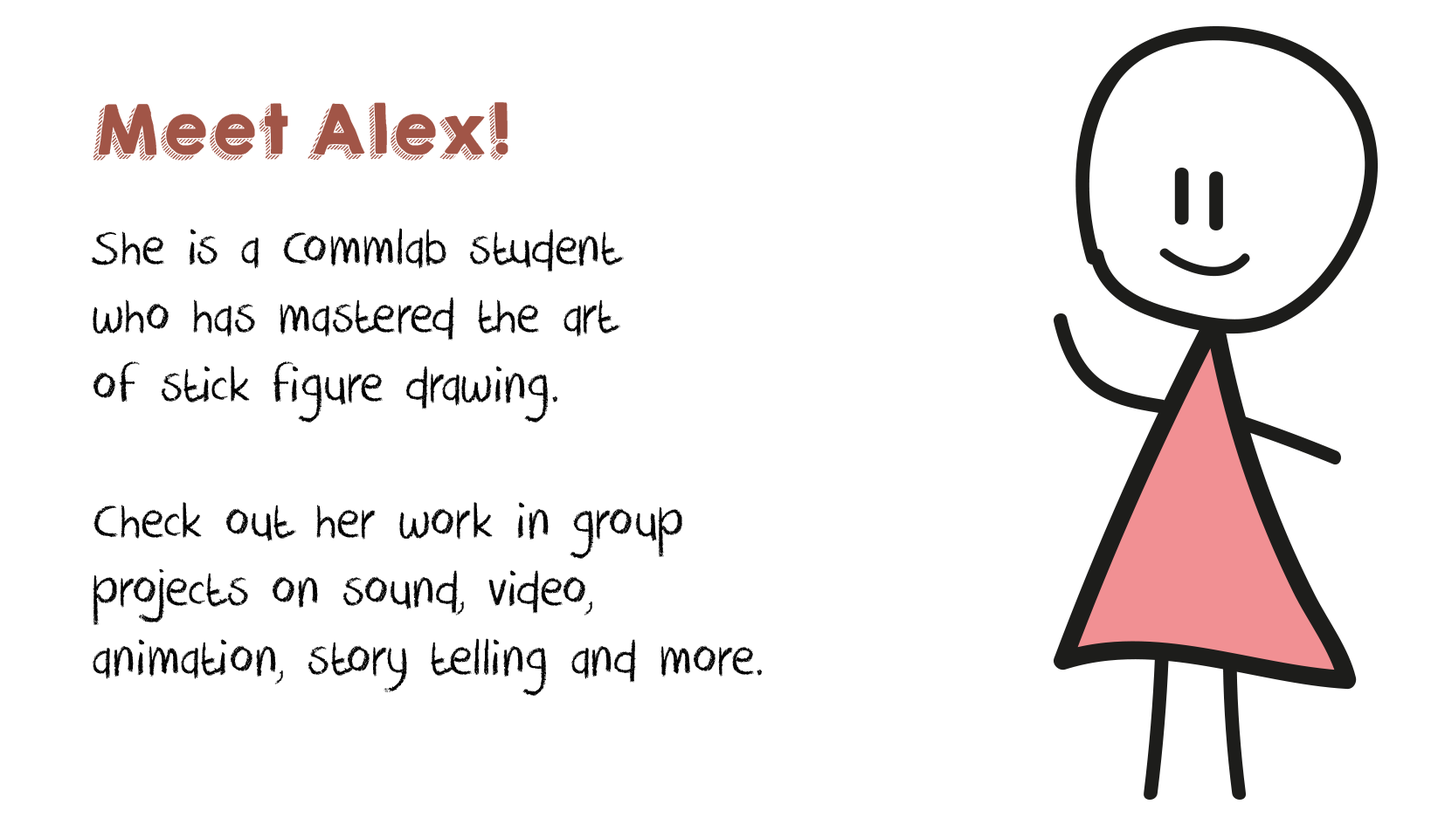
<style>
.page{position:relative;width:1445px;height:825px;background:#ffffff}
.page>*{position:absolute;margin:0}
.t1{font:57px "DKCrayonCrumble";color:#000000}
.t2{font:61.9px/42.7px "KGHAPPY";color:#a15547}
.t3{font:52.2px/42.7px "KGHAPPY";color:#a15547}
</style>
<div class="page">
<p class="t1" style="left:91px;top:102px;width:672px;height:594px"><span class="t2">Meet Alex!<br></span><span class="t3"><br></span>She is a Commlab student <br>who has mastered the art <br>of stick figure drawing.<br><br>Check out her work in group projects on sound, video, <br>animation, story telling and more.</p>
</div>
